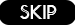
<style>
.page{position:relative;width:75px;height:25px;background:#000000}
.page>*{position:absolute;margin:0}
.t1{font:24px "Monopoly-Inline";color:#ffffff}
</style>
<div class="page">
<p class="t1" style="left:20px;top:5px;width:37px;height:14px">SKIP</p>
</div>
